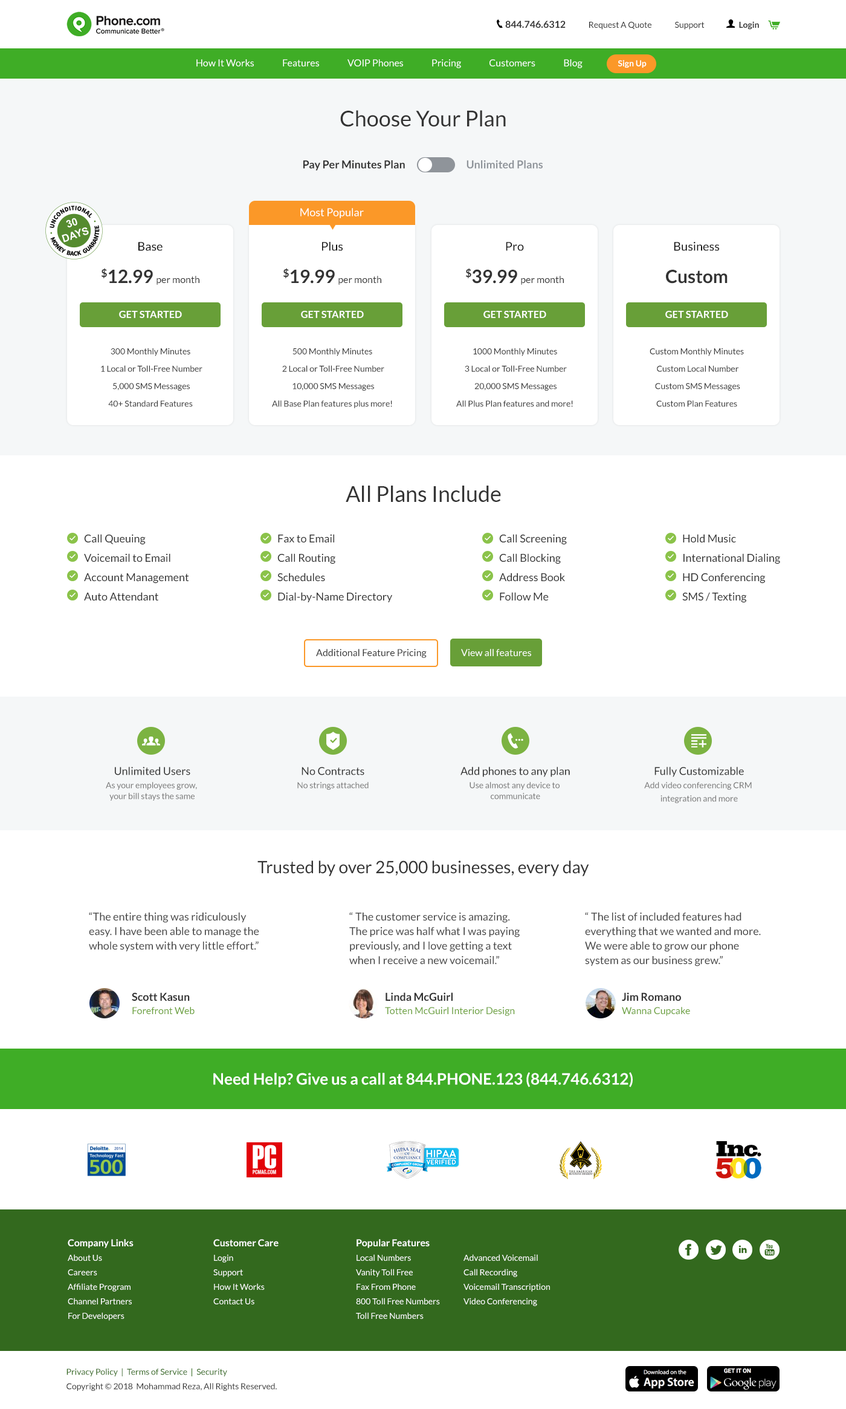
<style>
.page{position:relative;width:846px;height:1409px;background:#ffffff}
.page>*{position:absolute;margin:0}
.t1{font:8.5px "Lato-Regular";color:#333333}
.t2{font:9.7px "Lato-Bold";color:#333333}
.t3{font:8.5px "Lato-Bold";color:#333333}
.t4{font:9.7px "Lato-Regular";color:#ffffff}
.t5{font:8.5px "Lato-Bold";color:#ffffff}
.t6{font:21.8px "Lato-Regular";color:#333333}
.t7{font:10.9px "Lato-Bold";color:#333333}
.t8{font:10.9px "Lato-Bold";color:#8f949a}
.t9{font:10.9px "Lato-Regular";color:#ffffff}
.t10{font:12.1px "Lato-Regular";color:#111111}
.t11{font:9.7px "Lato-Regular";color:#333333}
.t12{font:18.1px "Lato-Bold";color:#333333}
.t13{font:16.9px "Lato-Bold";color:#ffffff;text-transform:uppercase}
.t14{font:14.5px "Lato-Regular";color:#333333}
.t15{font:10.9px/19.3px "Lato-Regular";color:#333333}
.t16{font:8.5px/10.9px "Lato-Regular";color:#777777}
.t17{font:10.9px/13.3px "Lato-Regular";color:#333333}
.t18{font:8.5px/13.3px "Lato-Regular";color:#777777}
.t19{font:16.9px "Lato-Regular";color:#333333}
.t20{font:10.9px/14.5px "Lato-Regular";color:#444444}
.t21{font:9.7px/13.3px "Lato-Regular";color:#689f38}
.t22{font:10.9px/13.3px "Lato-Bold";color:#333333}
.t23{font:15.7px "Lato-Bold";color:#ffffff}
.t24{font:8.5px/14.5px "Lato-Regular";color:#ffffff}
.t25{font:9.7px/14.5px "Lato-Bold";color:#ffffff}
.t26{font:8.5px/14.5px "Lato-Regular";color:#333333}
.t27{font:8.5px/14.5px "Lato-Regular";color:#33691e}
</style>
<div class="page">
<p class="t1" style="left:505px;top:21px;width:254px;height:9px"><span class="t2">844.746.6312</span>              Request A Quote              Support                     <span class="t3">Login</span></p>
<p class="t4" style="left:196px;top:59px;width:451px;height:9px">How It Works               Features               VOIP Phones               Pricing               Customers               Blog                   <span class="t5">Sign Up</span></p>
<p class="t6" style="left:340px;top:110px;width:166px;height:17px">Choose Your Plan</p>
<p class="t7" style="left:304px;top:160px;width:239px;height:10px">Pay Per Minutes Plan                             <span class="t8">Unlimited Plans</span></p>
<p class="t9" style="left:300px;top:208px;width:64px;height:10px">Most Popular</p>
<p class="t10" style="left:138px;top:242px;width:25px;height:9px">Base</p>
<p class="t10" style="left:322px;top:242px;width:21px;height:9px">Plus</p>
<p class="t10" style="left:506px;top:242px;width:18px;height:9px">Pro</p>
<p class="t10" style="left:674px;top:242px;width:45px;height:9px">Business</p>
<p class="t11" style="left:102px;top:268px;width:98px;height:17px"><span class="t12">$12.99 </span>per month</p>
<p class="t11" style="left:284px;top:268px;width:98px;height:17px"><span class="t12">$19.99 </span>per month</p>
<p class="t11" style="left:466px;top:268px;width:98px;height:17px"><span class="t12">$39.99 </span>per month</p>
<p class="t12" style="left:666px;top:270px;width:62px;height:14px">Custom</p>
<p class="t13" style="left:119px;top:311px;width:63px;height:7px">Get Started</p>
<p class="t13" style="left:301px;top:311px;width:63px;height:7px">Get Started</p>
<p class="t13" style="left:484px;top:311px;width:63px;height:7px">Get Started</p>
<p class="t13" style="left:666px;top:311px;width:63px;height:7px">Get Started</p>
<p class="t14" style="left:101px;top:348px;width:102px;height:59px;text-align:center">300 Monthly Minutes<br> 1 Local or Toll-Free Number<br> 5,000 SMS Messages<br>40+ Standard Features</p>
<p class="t14" style="left:272px;top:348px;width:120px;height:60px;text-align:center">500 Monthly Minutes<br> 2 Local or Toll-Free Number<br> 10,000 SMS Messages<br>All Base Plan features plus more!</p>
<p class="t14" style="left:456px;top:348px;width:117px;height:59px;text-align:center">1000 Monthly Minutes<br> 3 Local or Toll-Free Number<br> 20,000 SMS Messages<br>All Plus Plan features and more!</p>
<p class="t14" style="left:650px;top:348px;width:94px;height:59px;text-align:center">Custom Monthly Minutes<br> Custom Local Number<br> Custom SMS Messages<br>Custom Plan Features</p>
<p class="t6" style="left:346px;top:486px;width:155px;height:16px">All Plans Include</p>
<p class="t15" style="left:84px;top:534px;width:105px;height:67px">Call Queuing<br>Voicemail to Email<br>Account Management<br>Auto Attendant</p>
<p class="t15" style="left:278px;top:534px;width:114px;height:68px">Fax to Email<br>Call Routing<br>Schedules<br>Dial-by-Name Directory</p>
<p class="t15" style="left:499px;top:534px;width:68px;height:66px">Call Screening<br>Call Blocking<br>Address Book<br>Follow Me</p>
<p class="t15" style="left:683px;top:534px;width:98px;height:69px">Hold Music<br>International Dialing<br>HD Conferencing<br>SMS / Texting</p>
<p class="t11" style="left:316px;top:649px;width:111px;height:9px">Additional Feature Pricing</p>
<p class="t4" style="left:461px;top:649px;width:70px;height:8px">View all features</p>
<p class="t16" style="left:106px;top:767px;width:91px;height:34px;text-align:center"><span class="t17">Unlimited Users<br></span><span class="t18">As your employees grow, <br></span>your bill stays the same</p>
<p class="t18" style="left:297px;top:767px;width:72px;height:23px;text-align:center"><span class="t17">No Contracts<br></span>No strings attached</p>
<p class="t18" style="left:461px;top:767px;width:109px;height:32px;text-align:center"><span class="t17">Add phones to any plan<br></span>Use almost any device to <br><span class="t16">communicate</span></p>
<p class="t18" style="left:645px;top:767px;width:107px;height:36px;text-align:center"><span class="t17">Fully Customizable<br></span>Add video conferencing CRM <br>integration and more</p>
<p class="t19" style="left:258px;top:860px;width:331px;height:16px">Trusted by over 25,000 businesses, every day</p>
<p class="t20" style="left:89px;top:912px;width:170px;height:40px">“The entire thing was ridiculously<br>easy. I have been able to manage the<br>whole system with very little effort.”</p>
<p class="t20" style="left:349px;top:912px;width:171px;height:52px">“ The customer service is amazing. <br>The price was half what I was paying <br>previously, and I love getting a text <br>when I receive a new voicemail.”</p>
<p class="t20" style="left:585px;top:912px;width:176px;height:54px">“ The list of included features had <br>everything that we wanted and more.<br>We were able to grow our phone <br>system as our business grew.”</p>
<p class="t21" style="left:132px;top:992px;width:63px;height:23px"><span class="t22">Scott Kasun<br></span>Forefront Web</p>
<p class="t21" style="left:385px;top:992px;width:130px;height:24px"><span class="t22">Linda McGuirl<br></span>Totten McGuirl Interior Design</p>
<p class="t21" style="left:622px;top:992px;width:68px;height:24px"><span class="t22">Jim Romano<br></span>Wanna Cupcake</p>
<p class="t23" style="left:213px;top:1072px;width:420px;height:15px">Need Help? Give us a call at 844.PHONE.123 (844.746.6312)</p>
<p class="t24" style="left:68px;top:1239px;width:66px;height:81px"><span class="t25">Company Links<br></span>About Us<br>Careers<br>Affiliate Program<br>Channel Partners<br>For Developers</p>
<p class="t24" style="left:213px;top:1239px;width:66px;height:65px"><span class="t25">Customer Care<br></span>Login<br>Support<br>How It Works<br>Contact Us</p>
<p class="t24" style="left:356px;top:1239px;width:84px;height:80px"><span class="t25">Popular Features<br></span>Local Numbers<br>Vanity Toll Free<br>Fax From Phone<br>800 Toll Free Numbers<br>Toll Free Numbers</p>
<p class="t24" style="left:464px;top:1254px;width:86px;height:52px"><span class="t25"><br></span>Advanced Voicemail<br>Call Recording<br>Voicemail Transcription<br>Video Conferencing</p>
<p class="t26" style="left:67px;top:1368px;width:210px;height:23px"><span class="t27">Privacy Policy  |  Terms of Service  |  Security<br></span>Copyright © 2018  Mohammad Reza, All Rights Reserved.</p>
</div>
